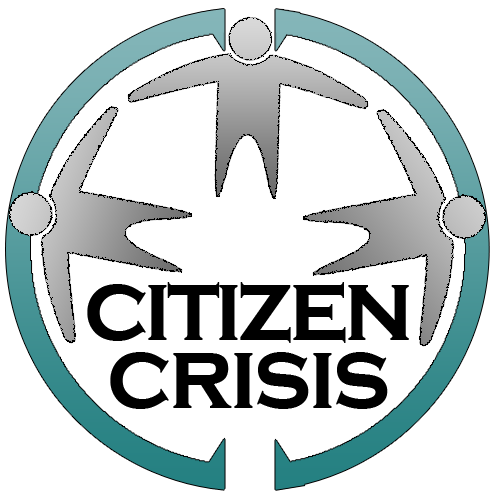
<style>
.page{position:relative;width:500px;height:500px;background:#ffffff}
.page>*{position:absolute;margin:0}
.t1{font:100px "CopperplateGothic-Bold";letter-spacing:-0.05em;color:#000000;scale:0.93 1}
.t2{font:100px "CopperplateGothic-Bold";letter-spacing:-0.03em;color:#000000;scale:0.93 1}
</style>
<div class="page">
<p class="t1" style="left:87px;top:282px;width:322px;height:61px">citizen</p>
<p class="t2" style="left:110px;top:352px;width:278px;height:57px">crisis</p>
</div>
